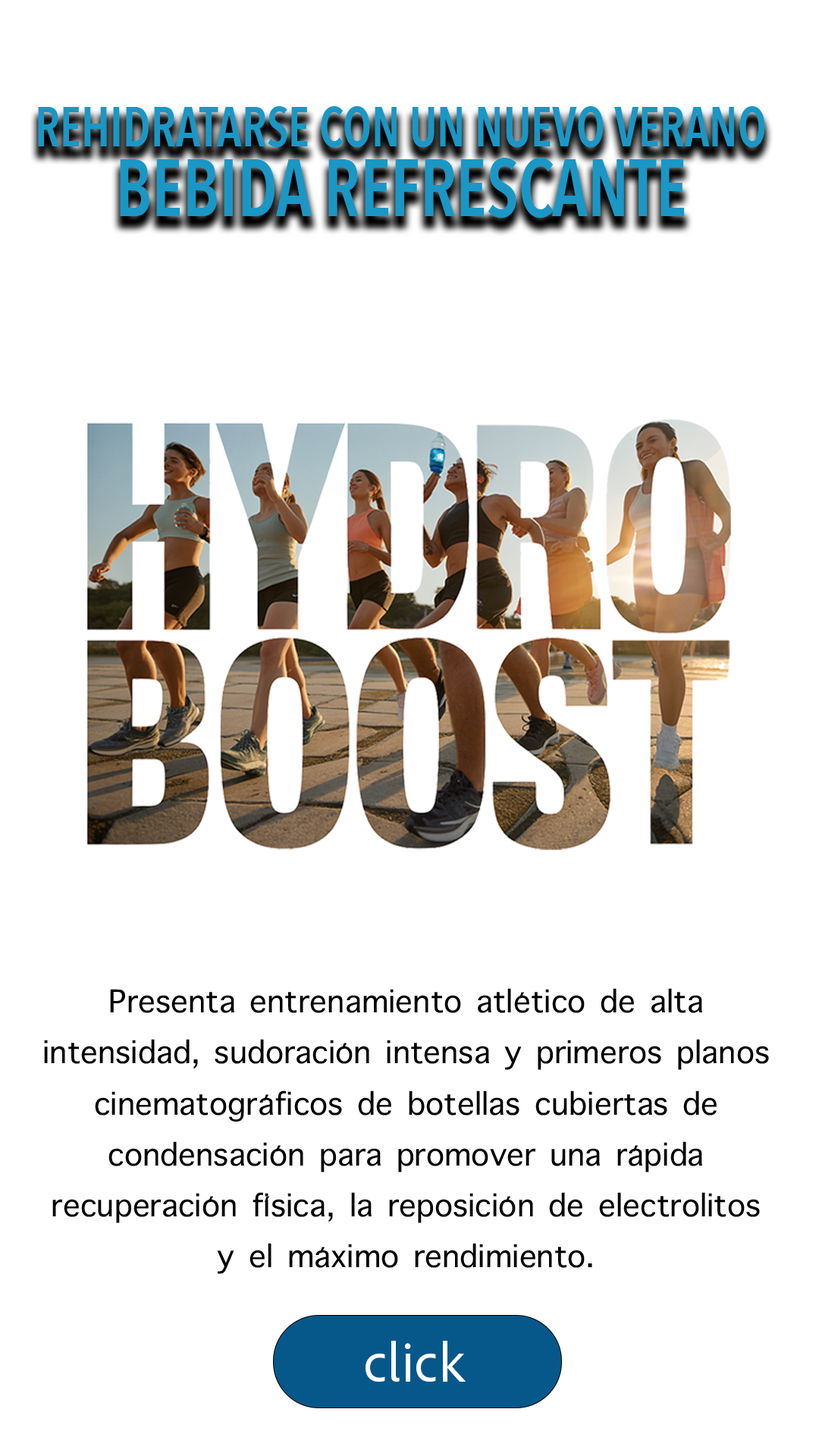
<style>
.page{position:relative;width:819px;height:1456px;background:#ffffff}
.page>*{position:absolute;margin:0}
.t1{font:55.6px/70.4px "AvenirNextCondensed-DemiBold";color:#1a97c5;scale:0.87 1}
.t2{font:80.4px/70.4px "AvenirNextCondensed-DemiBold";color:#1a97c5;scale:0.87 1}
.t3{font:42.5px "AppleSymbols";color:#000000}
.t4{font:56px "AdobeCleanUX-Regular";color:#ffffff}
</style>
<div class="page">
<p class="t1" style="left:38px;top:106px;width:727px;height:112px;text-align:center">REHIDRATARSE CON UN NUEVO VERANO<br><span class="t2">BEBIDA REFRESCANTE</span></p>
<p class="t3" style="left:44px;top:988px;width:725px;height:286px;text-align:center">Presenta entrenamiento atlético de alta intensidad, sudoración intensa y primeros planos cinematográficos de botellas cubiertas de condensación para promover una rápida recuperación física, la reposición de electrolitos y el máximo rendimiento.</p>
<p class="t4" style="left:366px;top:1341px;width:100px;height:41px">click</p>
</div>
